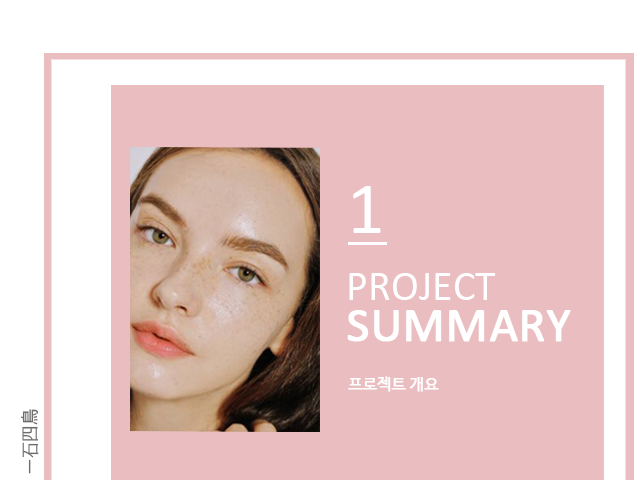
<style>
.page{position:relative;width:640px;height:480px;background:#eabec1}
.page>*{position:absolute;margin:0}
.t1{font:74.2px "Calibri";color:#ffffff}
.t2{font:42.2px "Calibri";color:#ffffff}
.t3{font:48.8px "Calibri";color:#ffffff;font-weight:bold}
.t4{font:15.7px "NanumBarunGothic";color:#fefefe;font-weight:bold}
.t5{font:18.5px "NanumBarunGothic";color:#6f6c6c}
</style>
<div class="page">
<p class="t1" style="left:353px;top:186px;width:28px;height:47px">1</p>
<p class="t2" style="left:349px;top:273px;width:147px;height:27px">PROJECT</p>
<p class="t3" style="left:347px;top:310px;width:224px;height:32px">SUMMARY</p>
<p class="t4" style="left:348px;top:376px;width:91px;height:16px">프로젝트 개요</p>
<p class="t5" style="left:21px;top:409px;width:18px;height:65px;rotate:-90deg">一石四鳥</p>
</div>
